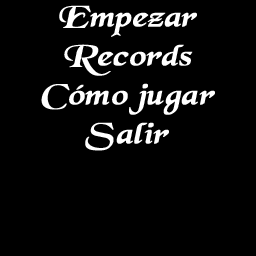
<style>
.page{position:relative;width:256px;height:256px;background:#000000}
.page>*{position:absolute;margin:0}
.t1{font:30.6px/39px "BlackChancery";color:#ffffff;font-weight:bold;font-style:italic;scale:1.18 1}
</style>
<div class="page">
<p class="t1" style="left:41px;top:5px;width:174px;height:146px;text-align:center">Empezar<br>Records<br>Cómo jugar<br>Salir</p>
</div>
